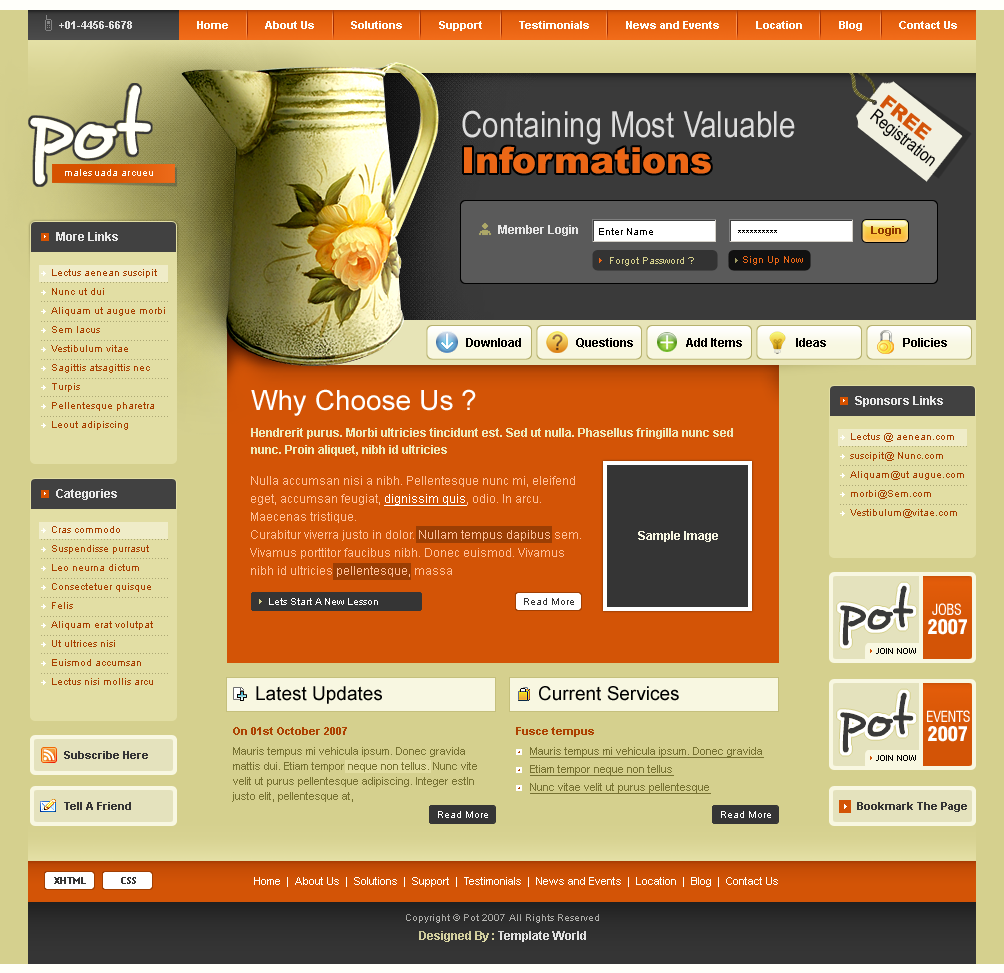
<style>
.page{position:relative;width:1004px;height:973px}
.page>*{position:absolute;margin:0}
.t1{font:11px "Arial-BoldMT";color:#e3e3e3}
.t2{font:11px "Arial-BoldMT";color:#fffffa}
.t3{font:91.4px "Desyrel";color:#fffffa}
.t4{font:20px "Arial-Black";color:#d3540a;text-transform:uppercase}
.t5{font:36px/18px "ArialNarrow";color:#dddddd}
.t6{font:36px/18px "Arial-Black";color:#ec6716}
.t7{font:18px "ArialNarrow";color:#050505}
.t8{font:10px "ArialMT";color:#fffffa}
.t9{font:12px "Arial-BoldMT";color:#e8e8e8}
.t10{font:12px "Arial-BoldMT";color:#e6e6e6}
.t11{font:10px "ArialMT";color:#000000}
.t12{font:11px "Arial-BoldMT";color:#8e3600}
.t13{font:10px "ArialMT";color:#d4cf8c}
.t14{font:10px "ArialMT";color:#ec6716}
.t15{font:10px/19px "ArialMT";color:#a73f00}
.t16{font:12px "Arial-BoldMT";color:#000000}
.t17{font:28px "ArialMT";color:#ffffff}
.t18{font:12px/17px "Arial-BoldMT";color:#eeeaba}
.t19{font:12px/18px "ArialMT";color:#ffbf98}
.t20{font:12px/18px "ArialMT";color:#ffffff;text-decoration:underline}
.t21{font:12px "Arial-BoldMT";color:#f8f7e2}
.t22{font:55.4px "Desyrel";color:#3a3a3a}
.t23{font:10px "ArialMT";color:#ffffff}
.t24{font:10px "ArialMT";color:#353535}
.t25{font:15px "Swiss721BT-RomanCondensed";letter-spacing:-0.025em;color:#ffffff;text-transform:uppercase}
.t26{font:19.5px "Swiss721BT-BlackCondensed";letter-spacing:-0.025em;color:#ffffff;text-transform:uppercase}
.t27{font:9px "TrebuchetMS";color:#000000;text-transform:uppercase}
.t28{font:19px "ArialMT";color:#000000}
.t29{font:11px "Arial-BoldMT";color:#ad4201}
.t30{font:11px/15px "ArialMT";color:#777232}
.t31{font:11px/18px "ArialMT";color:#777232;text-decoration:underline}
.t32{font:11px "Arial-BoldMT";color:#353535}
.t33{font:10px "TrebuchetMS-Bold";color:#353535}
.t34{font:11px "ArialMT";color:#fffffa}
.t35{font:10px "ArialMT";color:#a9a9a5}
.t36{font:12px "Arial-BoldMT"}
</style>
<div class="page">
<p class="t1" style="left:59px;top:21px;width:73px;height:8px">+01-4456-6678</p>
<p class="t2" style="left:197px;top:21px;width:760px;height:10px">Home            About Us            Solutions            Support            Testimonials            News and Events            Location            Blog            Contact Us</p>
<p class="t3" style="left:30px;top:85px;width:121px;height:100px">pot</p>
<p class="t4" style="left:879px;top:94px;width:53px;height:47px;rotate:38deg">free</p>
<p class="t5" style="left:462px;top:110px;width:333px;height:64px">Containing Most Valuable <br><br><span class="t6">Informations</span></p>
<p class="t7" style="left:870px;top:108px;width:65px;height:59px;rotate:38deg">Registration</p>
<p class="t8" style="left:65px;top:169px;width:88px;height:7px">malesuada arcueu</p>
<p class="t9" style="left:56px;top:232px;width:62px;height:9px">More Links</p>
<p class="t10" style="left:498px;top:225px;width:80px;height:11px">Member Login</p>
<p class="t11" style="left:599px;top:228px;width:54px;height:7px">Enter Name</p>
<p class="t11" style="left:738px;top:230px;width:39px;height:3px">**********</p>
<p class="t12" style="left:871px;top:226px;width:30px;height:10px">Login</p>
<p class="t13" style="left:610px;top:257px;width:84px;height:9px">Forgot Password ?</p>
<p class="t14" style="left:743px;top:256px;width:60px;height:9px">Sign Up Now</p>
<p class="t15" style="left:51px;top:269px;width:114px;height:161px">Lectus aenean suscipit Nunc ut dui <br>Aliquam ut augue morbi Sem lacus <br>Vestibulum vitae<br>Sagittis atsagittis nec Turpis<br>Pellentesque pharetra Leout adipiscing</p>
<p class="t16" style="left:466px;top:338px;width:55px;height:9px">Download</p>
<p class="t16" style="left:576px;top:338px;width:57px;height:10px">Questions</p>
<p class="t16" style="left:686px;top:338px;width:56px;height:9px">Add Items</p>
<p class="t16" style="left:796px;top:338px;width:30px;height:9px">Ideas</p>
<p class="t16" style="left:903px;top:338px;width:44px;height:9px">Policies</p>
<p class="t17" style="left:251px;top:389px;width:225px;height:27px">Why Choose Us ?</p>
<p class="t9" style="left:855px;top:396px;width:88px;height:11px">Sponsors Links</p>
<p class="t18" style="left:251px;top:428px;width:482px;height:28px">Hendrerit purus. Morbi ultricies tincidunt est. Sed ut nulla. Phasellus fringilla nunc sed nunc. Proin aliquet, nibh id ultricies</p>
<p class="t15" style="left:850px;top:433px;width:114px;height:85px">Lectus @ aenean.com suscipit@ Nunc.com <br>Aliquam@ut augue.com morbi@Sem.com<br>Vestibulum@vitae.com</p>
<p class="t19" style="left:250px;top:476px;width:331px;height:101px">Nulla accumsan nisi a nibh. Pellentesque nunc mi, eleifend eget, accumsan feugiat, <span class="t20">dignissim quis</span>, odio. In arcu. Maecenas tristique. <br>Curabitur viverra justo in dolor. Nullam tempus dapibus sem. Vivamus porttitor faucibus nibh. Donec euismod. Vivamus<br>nibh id ultricies pellentesque, massa</p>
<p class="t9" style="left:56px;top:489px;width:61px;height:11px">Categories</p>
<p class="t15" style="left:51px;top:526px;width:102px;height:159px">Cras commodo Suspendisse purrasut Leo neurna dictum Consectetuer quisque Felis<br>Aliquam erat volutpat<br>Ut ultrices nisi <br>Euismod accumsan Lectus nisi mollis arcu</p>
<p class="t21" style="left:638px;top:531px;width:80px;height:11px">Sample Image</p>
<p class="t22" style="left:840px;top:585px;width:74px;height:61px">pot</p>
<p class="t23" style="left:269px;top:598px;width:109px;height:7px">Lets Start A New Lesson</p>
<p class="t24" style="left:524px;top:598px;width:50px;height:7px">Read More</p>
<p class="t25" style="left:932px;top:603px;width:29px;height:12px">jobs</p>
<p class="t26" style="left:928px;top:619px;width:39px;height:16px">2007</p>
<p class="t27" style="left:876px;top:648px;width:40px;height:6px">Join Now</p>
<p class="t28" style="left:256px;top:686px;width:126px;height:18px">Latest Updates</p>
<p class="t28" style="left:539px;top:686px;width:140px;height:15px">Current Services</p>
<p class="t22" style="left:840px;top:692px;width:74px;height:61px">pot</p>
<p class="t25" style="left:927px;top:710px;width:43px;height:12px">events</p>
<p class="t26" style="left:928px;top:726px;width:39px;height:16px">2007</p>
<p class="t29" style="left:233px;top:727px;width:114px;height:8px">On 01st October 2007</p>
<p class="t29" style="left:516px;top:727px;width:78px;height:10px">Fusce tempus</p>
<p class="t30" style="left:232px;top:747px;width:245px;height:55px">Mauris tempus mi vehicula ipsum. Donec gravida mattis dui. Etiam tempor neque non tellus. Nunc vite velit ut purus pellentesque adipiscing. Integer estIn justo elit, pellentesque at,</p>
<p class="t31" style="left:530px;top:747px;width:234px;height:47px">Mauris tempus mi vehicula ipsum. Donec gravida Etiam tempor neque non tellus<br>Nunc vitae velit ut purus pellentesque</p>
<p class="t32" style="left:64px;top:751px;width:84px;height:8px">Subscribe Here</p>
<p class="t27" style="left:876px;top:755px;width:40px;height:6px">Join Now</p>
<p class="t32" style="left:64px;top:802px;width:67px;height:8px">Tell A Friend</p>
<p class="t32" style="left:857px;top:802px;width:110px;height:10px">Bookmark The Page</p>
<p class="t23" style="left:438px;top:811px;width:50px;height:7px">Read More</p>
<p class="t23" style="left:721px;top:811px;width:50px;height:7px">Read More</p>
<p class="t33" style="left:54px;top:877px;width:32px;height:7px">XHTML</p>
<p class="t33" style="left:121px;top:877px;width:15px;height:7px">CSS</p>
<p class="t34" style="left:254px;top:877px;width:524px;height:10px">Home  |  About Us  |  Solutions  |  Support  |  Testimonials  |  News and Events  |  Location  |  Blog  |  Contact Us</p>
<p class="t35" style="left:406px;top:914px;width:193px;height:9px">Copyright © Pot 2007 All Rights Reserved</p>
<p class="t36" style="left:419px;top:931px;width:167px;height:11px">Designed By : Template World</p>
</div>
